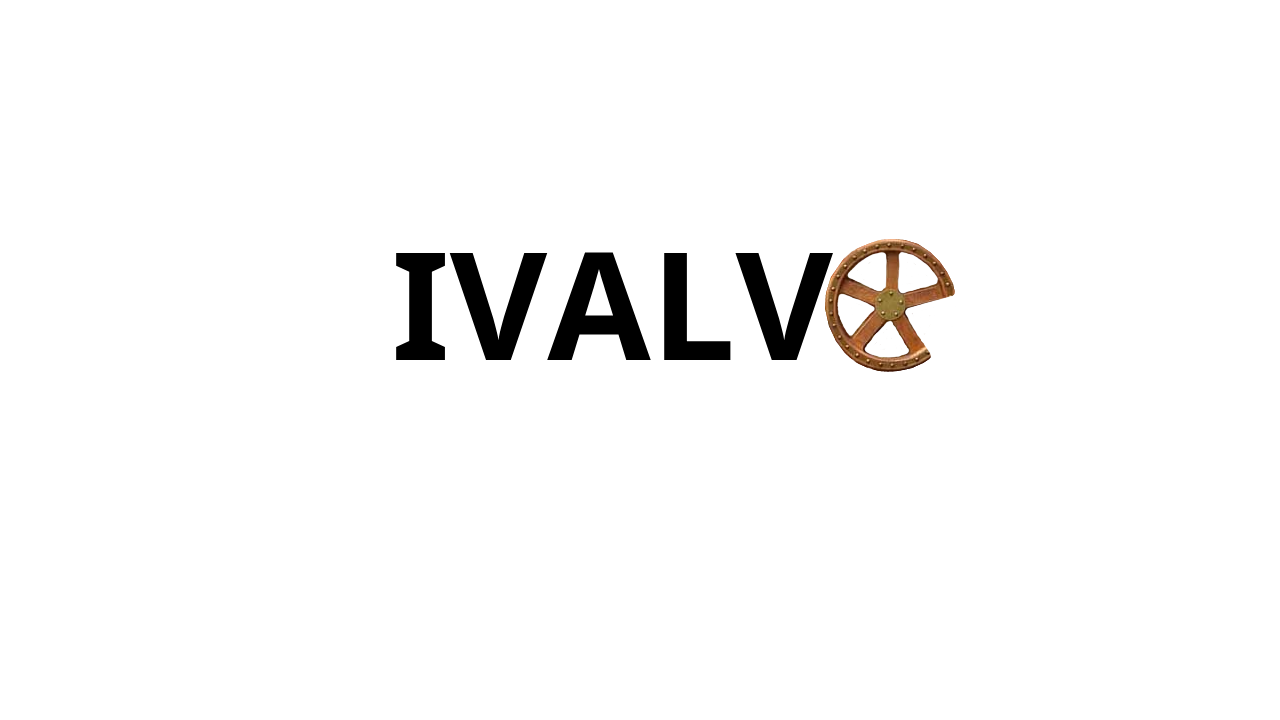
<style>
.page{position:relative;width:1280px;height:720px;background:#ffffff}
.page>*{position:absolute;margin:0}
.t1{font:150px "NotoSansTaiTham-Bold";color:#000000}
</style>
<div class="page">
<p class="t1" style="left:396px;top:252px;width:437px;height:108px">IVALV</p>
</div>
